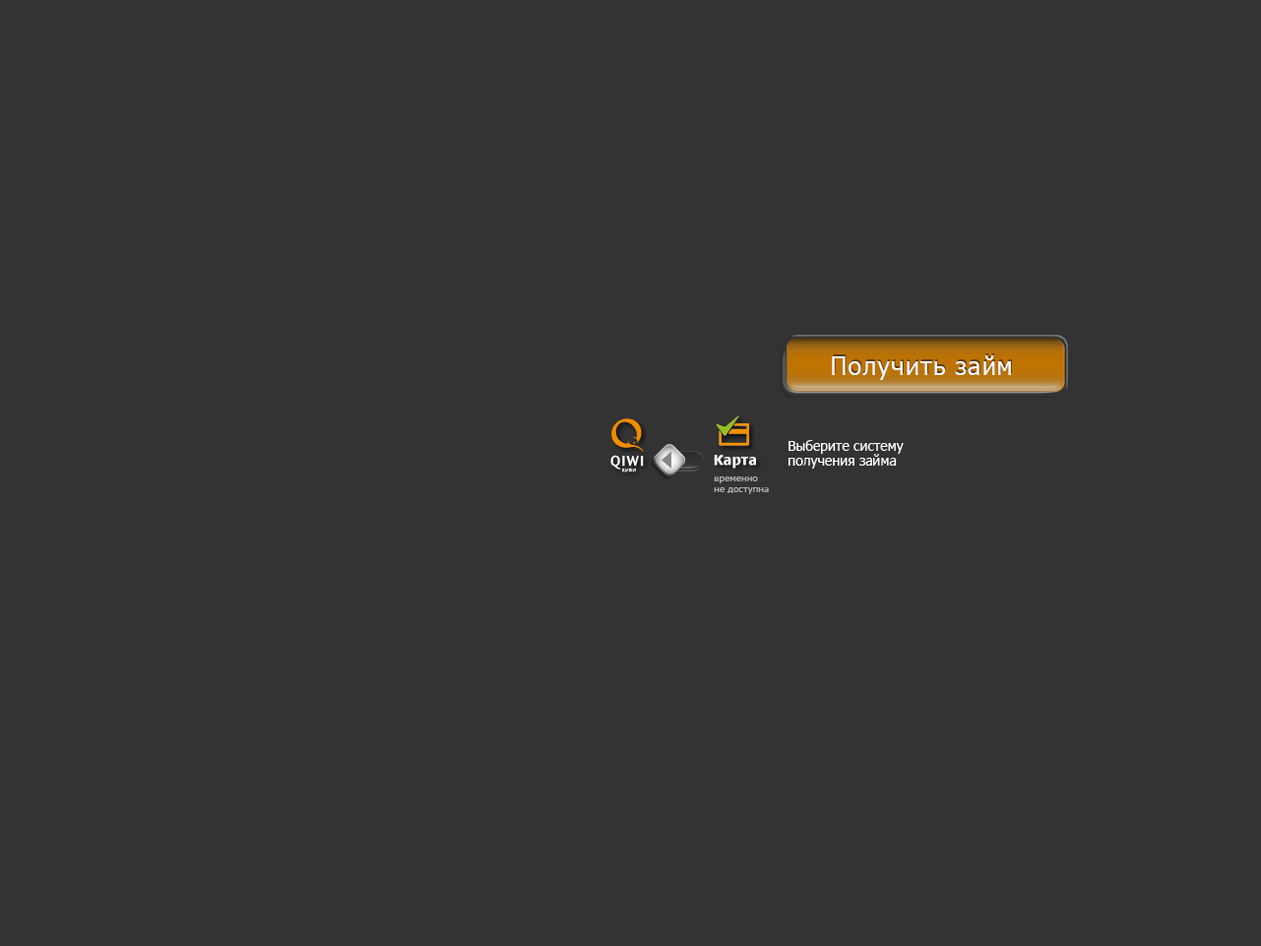
<style>
.page{position:relative;width:1261px;height:946px;background:#333333}
.page>*{position:absolute;margin:0}
.t1{font:24.5px "Tahoma";letter-spacing:0.05em}
.t2{font:24.5px "Tahoma";letter-spacing:0.05em;color:#ffffff}
.t3{font:13.7px/14.9px "Tahoma";color:#ffffff}
.t4{font:13.4px "Tahoma-Bold";letter-spacing:0.05em;color:#ffffff}
.t5{font:9.8px/10.8px "Tahoma";color:#b1b1b1}
</style>
<div class="page">
<p class="t1" style="left:833px;top:353px;width:179px;height:25px">Получить займ</p>
<p class="t2" style="left:832px;top:355px;width:179px;height:25px">Получить займ</p>
<p class="t3" style="left:788px;top:440px;width:115px;height:28px">Выберите систему <br>получения займа</p>
<p class="t4" style="left:714px;top:456px;width:42px;height:12px">Карта</p>
<p class="t4" style="left:714px;top:455px;width:42px;height:12px">Карта</p>
<p class="t5" style="left:714px;top:476px;width:55px;height:18px">временно <br>не доступна</p>
</div>
